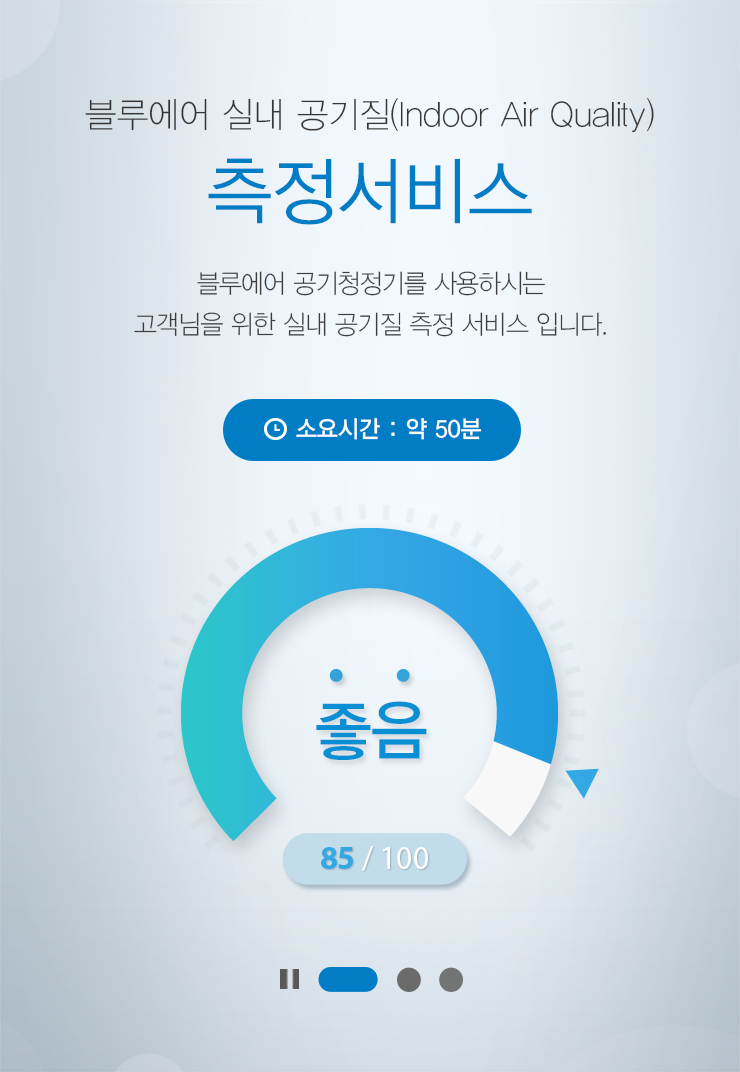
<style>
.page{position:relative;width:740px;height:1072px}
.page>*{position:absolute;margin:0}
.t1{font:35px/36px "YDVYGO31";color:#373737;scale:0.97 1}
.t2{font:73px/88px "YDVYGO32";color:#007dc5;scale:0.97 1}
.t3{font:26px/41px "YDVYGO31";letter-spacing:-0.025em;color:#3d3d3d;scale:0.95 1}
.t4{font:26px/26px "YDVYGO31";letter-spacing:-0.025em;color:#3d3d3d;scale:0.95 1}
.t5{font:24px "YDVYGO33";color:#ffffff;scale:0.95 1}
.t6{font:65px "YDVYGO33";color:#0a8fd4;scale:0.95 1}
.t7{font:34px "MyriadPro-Regular";color:#ffffff;scale:0.95 1}
.t8{font:34px "MyriadPro-Bold";color:#33a8e4;scale:0.95 1}
</style>
<div class="page">
<p class="t1" style="left:85px;top:97px;width:569px;height:128px;text-align:center">블루에어 실내 공기질(Indoor Air Quality)<br><span class="t2">측정서비스</span></p>
<p class="t3" style="left:134px;top:271px;width:472px;height:66px;text-align:center"><span class="t4">블루에어 공기청정기를 사용하시는<br></span>고객님을 위한 실내 공기질 측정 서비스 입니다.</p>
<p class="t5" style="left:296px;top:418px;width:186px;height:22px">소요시간 : 약 50분</p>
<p class="t6" style="left:316px;top:701px;width:111px;height:59px">좋음</p>
<p class="t7" style="left:321px;top:846px;width:107px;height:25px"><span class="t8">85 </span>/ 100</p>
</div>
